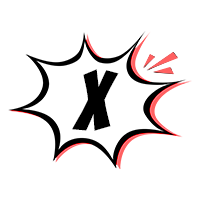
<style>
.page{position:relative;width:200px;height:200px;background:#ffffff}
.page>*{position:absolute;margin:0}
.t1{font:83.3px "Bangers-Regular";letter-spacing:0.04em;color:#000000}
</style>
<div class="page">
<p class="t1" style="left:72px;top:69px;width:47px;height:62px">x</p>
</div>
